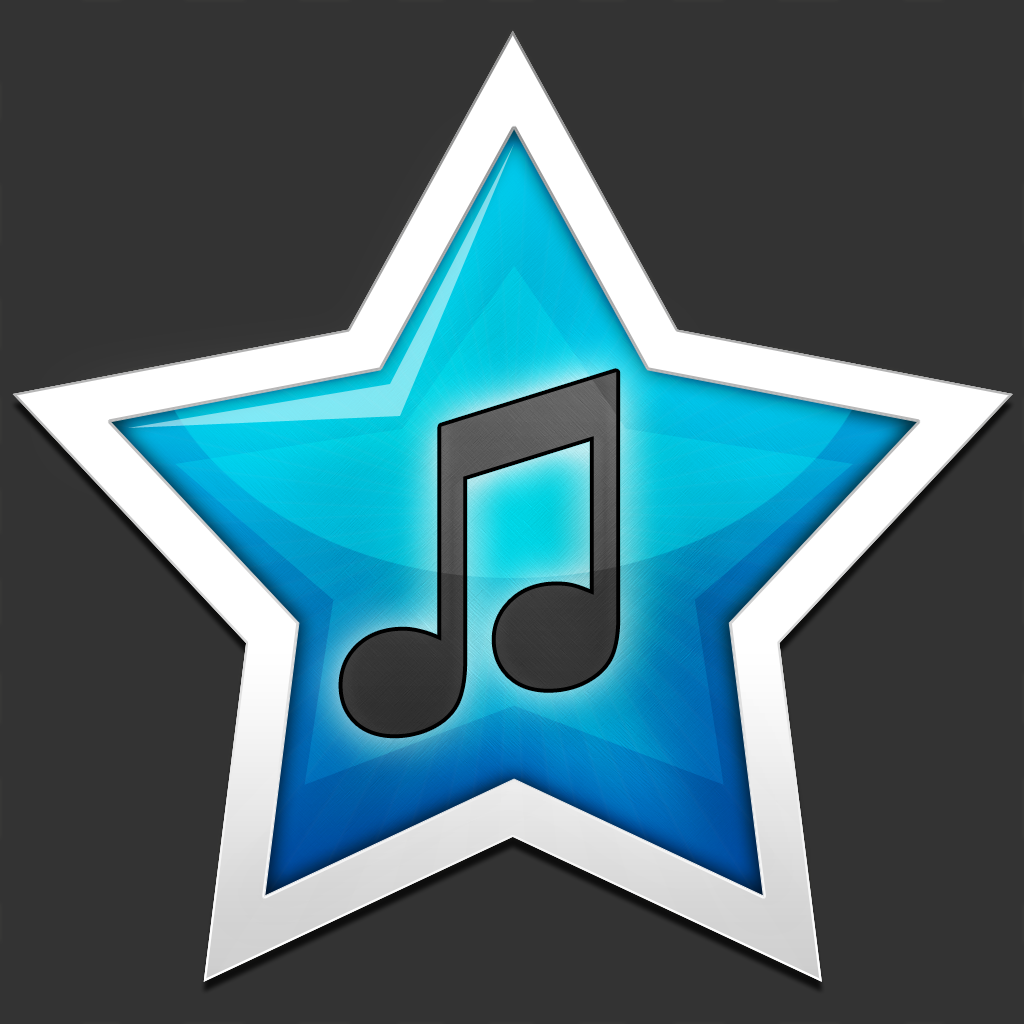
<style>
.page{position:relative;width:1024px;height:1024px;background:#333333}
.page>*{position:absolute;margin:0}
.t1{font:450.1px "ArialMT"}
</style>
<div class="page">
<p class="t1" style="left:342px;top:372px;width:275px;height:363px">♫</p>
</div>
